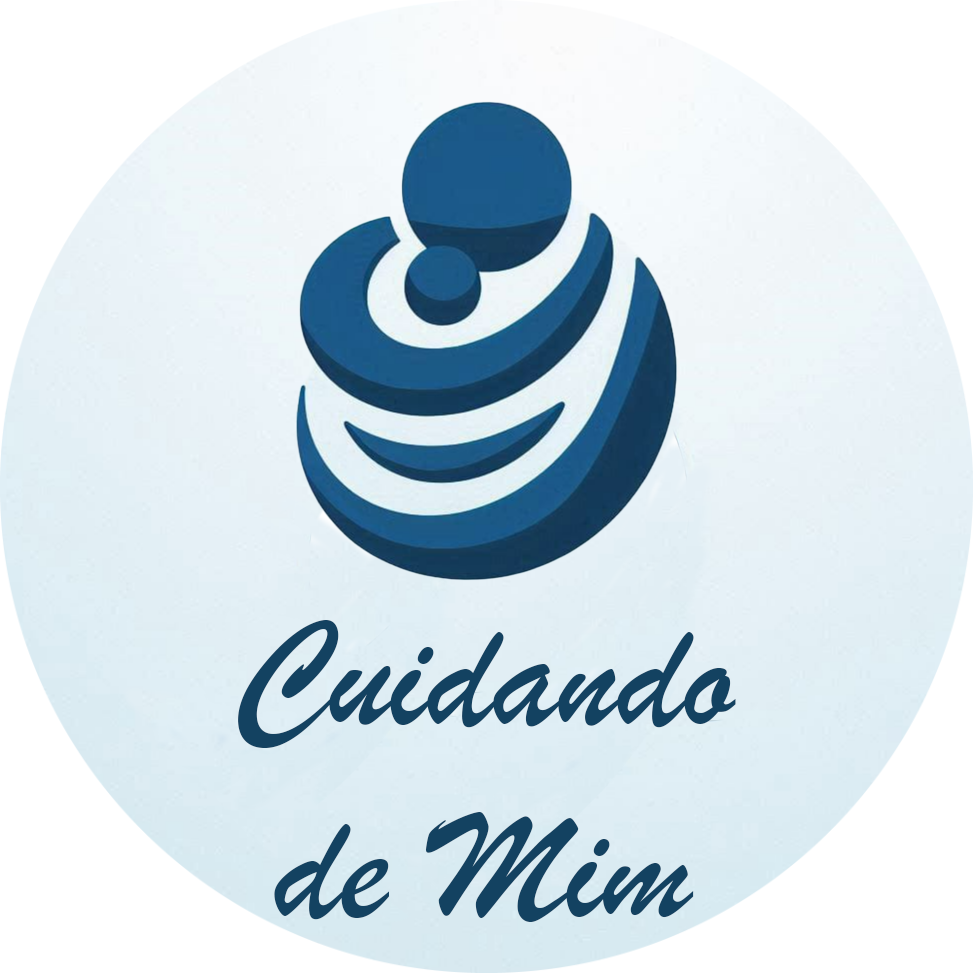
<style>
.page{position:relative;width:973px;height:973px;background:#ffffff}
.page>*{position:absolute;margin:0}
.t1{font:160px "BrushScriptMT";color:#134261}
</style>
<div class="page">
<p class="t1" style="left:238px;top:620px;width:498px;height:302px;text-align:center">Cuidando<br>de Mim</p>
</div>
